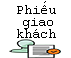
<style>
.page{position:relative;width:71px;height:58px;background:#ffffff}
.page>*{position:absolute;margin:0}
.t1{font:14px/12px "CourierNewPSMT";color:#000000}
</style>
<div class="page">
<p class="t1" style="left:17px;top:1px;width:39px;height:37px;text-align:center">Phiếu<br> giao<br>khách</p>
</div>
